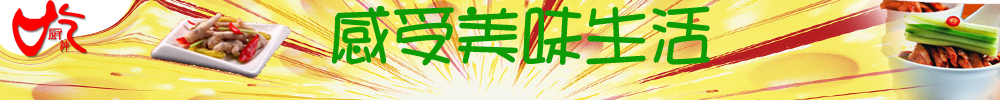
<style>
.page{position:relative;width:1000px;height:100px}
.page>*{position:absolute;margin:0}
.t1{font:64px "Pop4EG-Bold-Big5";color:#0d9c06}
</style>
<div class="page">
<p class="t1" style="left:331px;top:6px;width:379px;height:60px">感受美味生活</p>
</div>
